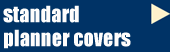
<style>
.page{position:relative;width:170px;height:52px;background:#003366}
.page>*{position:absolute;margin:0}
.t1{font:36px/24px "Impact";color:#fefdfc}
</style>
<div class="page">
<p class="t1" style="left:3px;top:5px;width:128px;height:44px">standard<br>planner covers</p>
</div>
